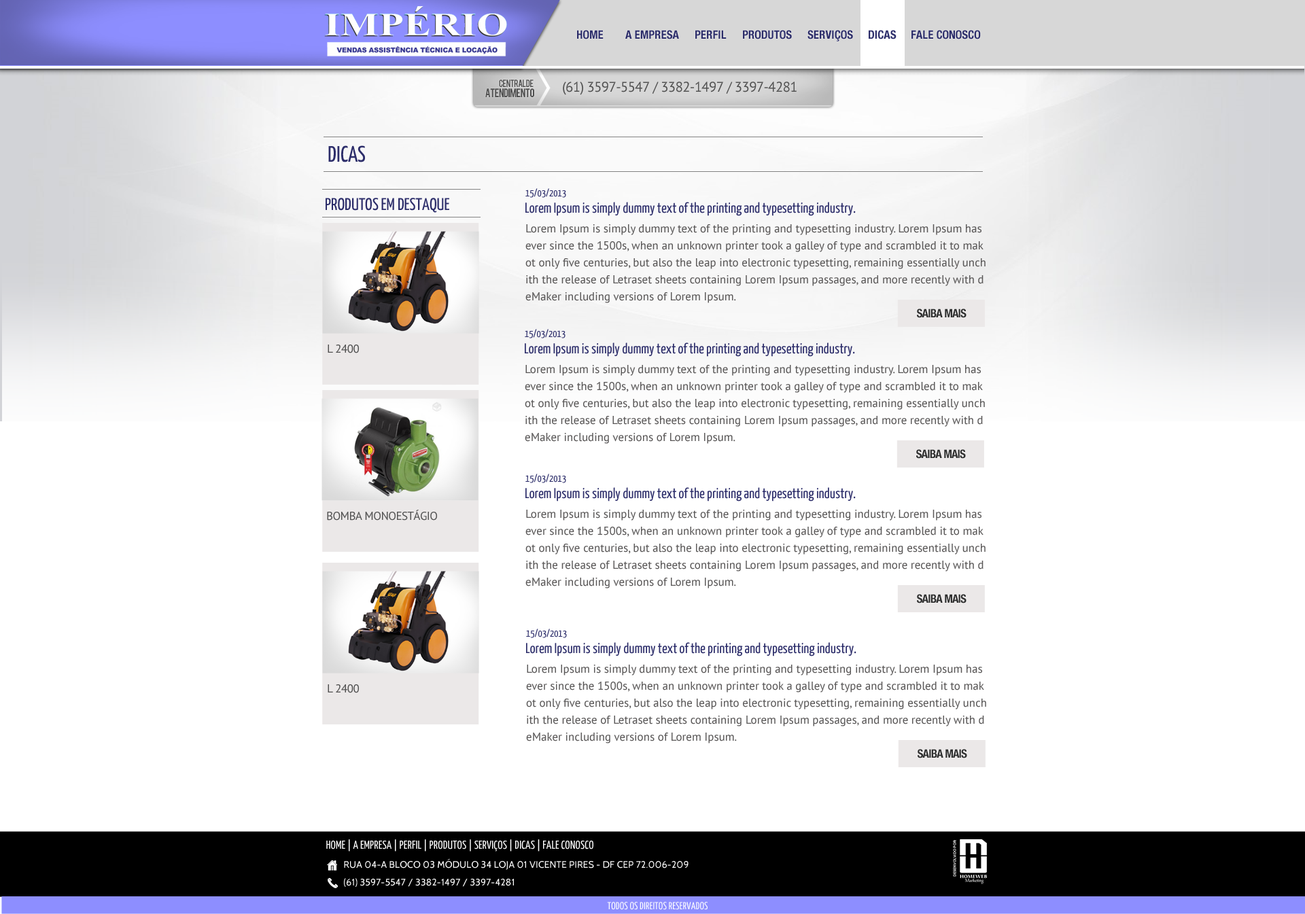
<style>
.page{position:relative;width:1305px;height:914px;background:#ffffff}
.page>*{position:absolute;margin:0}
.t1{font:11.6px "HelveticaNeue-CondensedBold";color:#2c2d6a}
.t2{font:9.6px "Bebas";letter-spacing:-0.05em;color:#505050}
.t3{font:8.1px "Bebas";letter-spacing:-0.05em;color:#505050}
.t4{font:14.1px "PTSans-Regular";letter-spacing:-0.03em;color:#505050}
.t5{font:22.5px "YanoneKaffeesatz-Regular";color:#2c2d6a}
.t6{font:17px "YanoneKaffeesatz-Regular";color:#2c2d6a}
.t7{font:10.2px "YanoneKaffeesatz-Regular";color:#2c2d6a}
.t8{font:14.3px "YanoneKaffeesatz-Regular";color:#2c2d6a}
.t9{font:11.6px/17px "PTSans-Regular";color:#5a5858}
.t10{font:11.6px "HelveticaNeue-CondensedBold";letter-spacing:-0.05em;color:#2f2f2f}
.t11{font:11.6px "PTSans-Regular";letter-spacing:-0.03em;color:#505050}
.t12{font:11.6px "YanoneKaffeesatz-Regular";letter-spacing:0.01em;color:#ffffff}
.t13{font:3.7px "Cabin-Bold";letter-spacing:0.01em}
.t14{font:9.5px "Cabin-Regular";letter-spacing:0.01em;color:#ffffff}
.t15{font:10.2px "YanoneKaffeesatz-Regular";letter-spacing:0.01em;color:#ffffff}
</style>
<div class="page">
<p class="t1" style="left:577px;top:30px;width:26px;height:9px">HOME</p>
<p class="t1" style="left:625px;top:30px;width:54px;height:9px">A EMPRESA</p>
<p class="t1" style="left:695px;top:30px;width:31px;height:9px">PERFIL</p>
<p class="t1" style="left:743px;top:30px;width:49px;height:9px">PRODUTOS</p>
<p class="t1" style="left:807px;top:30px;width:46px;height:11px">SERVIÇOS</p>
<p class="t1" style="left:868px;top:30px;width:28px;height:9px">DICAS</p>
<p class="t1" style="left:911px;top:30px;width:70px;height:9px">FALE CONOSCO</p>
<p class="t2" style="left:485px;top:88px;width:49px;height:9px">ATENDIMENTO</p>
<p class="t3" style="left:499px;top:80px;width:34px;height:7px">CENTRAL DE</p>
<p class="t4" style="left:563px;top:82px;width:233px;height:13px">(61) 3597-5547 / 3382-1497 / 3397-4281</p>
<p class="t5" style="left:328px;top:145px;width:37px;height:17px">DICAS</p>
<p class="t6" style="left:325px;top:198px;width:124px;height:15px">PRODUTOS EM DESTAQUE</p>
<p class="t7" style="left:525px;top:188px;width:41px;height:10px">15/03/2013</p>
<p class="t8" style="left:525px;top:202px;width:331px;height:14px">Lorem Ipsum is simply dummy text of the printing and typesetting industry.</p>
<p class="t9" style="left:525px;top:224px;width:460px;height:79px">Lorem Ipsum is simply dummy text of the printing and typesetting industry. Lorem Ipsum has <br>ever since the 1500s, when an unknown printer took a galley of type and scrambled it to mak<br>ot only five centuries, but also the leap into electronic typesetting, remaining essentially unch<br>ith the release of Letraset sheets containing Lorem Ipsum passages, and more recently with d<br>eMaker including versions of Lorem Ipsum.</p>
<p class="t10" style="left:917px;top:309px;width:49px;height:9px">SAIBA MAIS</p>
<p class="t7" style="left:525px;top:329px;width:40px;height:9px">15/03/2013</p>
<p class="t11" style="left:328px;top:345px;width:31px;height:8px">L 2400</p>
<p class="t8" style="left:525px;top:342px;width:330px;height:15px">Lorem Ipsum is simply dummy text of the printing and typesetting industry.</p>
<p class="t9" style="left:525px;top:365px;width:460px;height:79px">Lorem Ipsum is simply dummy text of the printing and typesetting industry. Lorem Ipsum has <br>ever since the 1500s, when an unknown printer took a galley of type and scrambled it to mak<br>ot only five centuries, but also the leap into electronic typesetting, remaining essentially unch<br>ith the release of Letraset sheets containing Lorem Ipsum passages, and more recently with d<br>eMaker including versions of Lorem Ipsum.</p>
<p class="t10" style="left:916px;top:449px;width:50px;height:10px">SAIBA MAIS</p>
<p class="t7" style="left:525px;top:474px;width:41px;height:9px">15/03/2013</p>
<p class="t8" style="left:525px;top:487px;width:331px;height:14px">Lorem Ipsum is simply dummy text of the printing and typesetting industry.</p>
<p class="t11" style="left:327px;top:510px;width:110px;height:11px">BOMBA MONOESTÁGIO</p>
<p class="t9" style="left:525px;top:510px;width:460px;height:78px">Lorem Ipsum is simply dummy text of the printing and typesetting industry. Lorem Ipsum has <br>ever since the 1500s, when an unknown printer took a galley of type and scrambled it to mak<br>ot only five centuries, but also the leap into electronic typesetting, remaining essentially unch<br>ith the release of Letraset sheets containing Lorem Ipsum passages, and more recently with d<br>eMaker including versions of Lorem Ipsum.</p>
<p class="t10" style="left:917px;top:594px;width:49px;height:9px">SAIBA MAIS</p>
<p class="t7" style="left:526px;top:629px;width:41px;height:9px">15/03/2013</p>
<p class="t8" style="left:526px;top:642px;width:330px;height:14px">Lorem Ipsum is simply dummy text of the printing and typesetting industry.</p>
<p class="t9" style="left:526px;top:665px;width:460px;height:78px">Lorem Ipsum is simply dummy text of the printing and typesetting industry. Lorem Ipsum has <br>ever since the 1500s, when an unknown printer took a galley of type and scrambled it to mak<br>ot only five centuries, but also the leap into electronic typesetting, remaining essentially unch<br>ith the release of Letraset sheets containing Lorem Ipsum passages, and more recently with d<br>eMaker including versions of Lorem Ipsum.</p>
<p class="t11" style="left:328px;top:684px;width:31px;height:9px">L 2400</p>
<p class="t10" style="left:917px;top:749px;width:50px;height:9px">SAIBA MAIS</p>
<p class="t12" style="left:326px;top:839px;width:267px;height:12px">HOME | A EMPRESA | PERFIL | PRODUTOS | SERVIÇOS | DICAS | FALE CONOSCO</p>
<p class="t13" style="left:953px;top:840px;width:3px;height:37px;rotate:-90deg">DESENVOLVIDO POR:</p>
<p class="t14" style="left:344px;top:858px;width:344px;height:12px">RUA 04-A BLOCO 03 MÓDULO 34 LOJA 01 VICENTE PIRES - DF CEP 72.006-209</p>
<p class="t14" style="left:344px;top:878px;width:170px;height:9px">(61) 3597-5547 / 3382-1497 / 3397-4281</p>
<p class="t15" style="left:607px;top:902px;width:100px;height:8px">TODOS OS DIREITOS RESERVADOS</p>
</div>
